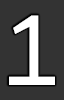
<style>
.page{position:relative;width:64px;height:100px;background:#333333}
.page>*{position:absolute;margin:0}
.t1{font:100px "Amiko-Regular";color:#ffffff}
</style>
<div class="page">
<p class="t1" style="left:9px;top:15px;width:46px;height:70px">1</p>
</div>
